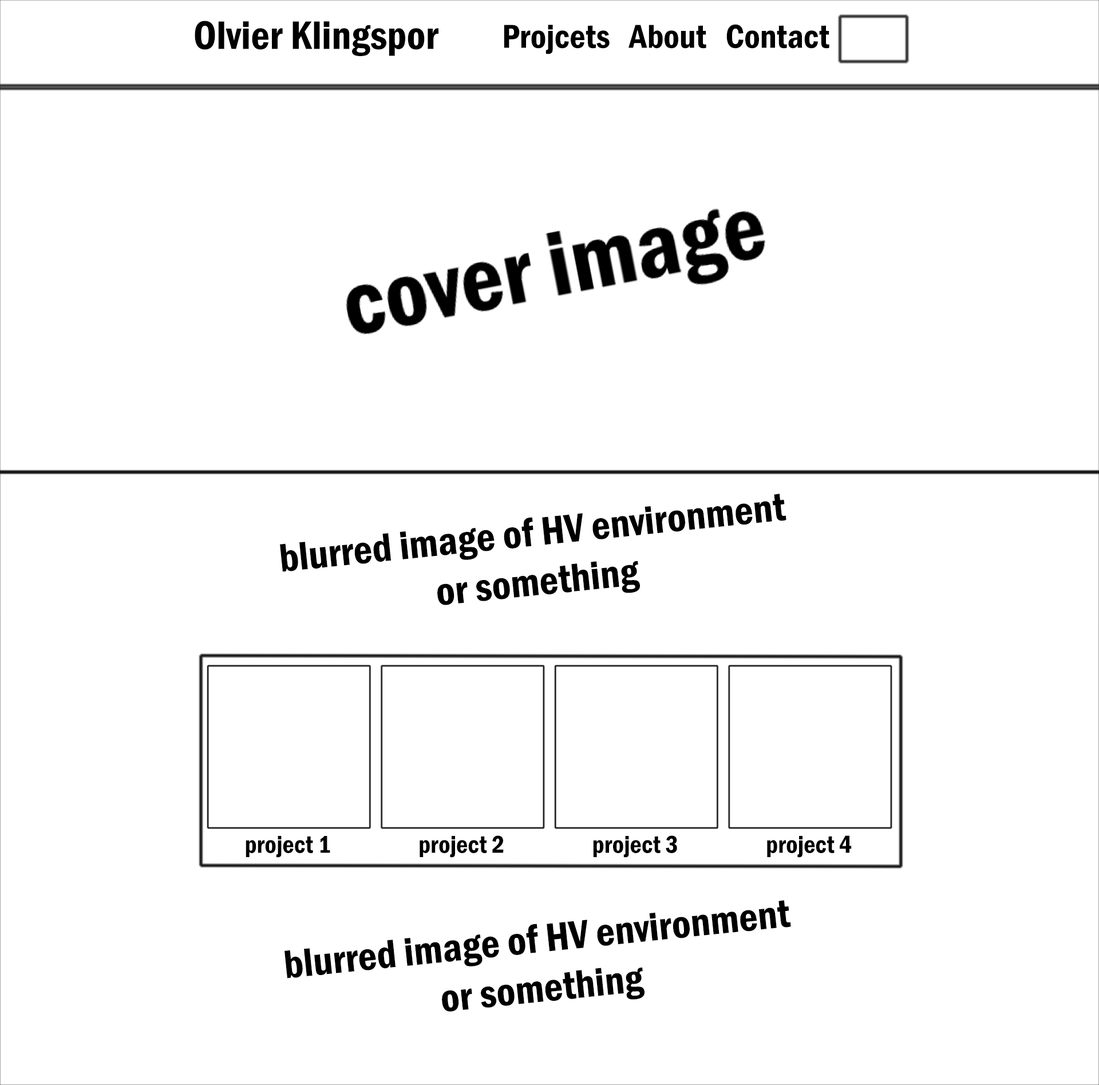
<style>
.page{position:relative;width:1099px;height:1085px;background:#ffffff}
.page>*{position:absolute;margin:0}
.t1{font:41.2px "FranklinGothic-DemiCond";color:#000000}
.t2{font:34.3px "FranklinGothic-DemiCond";color:#000000}
.t3{font:25.4px "FranklinGothic-DemiCond";color:#000000}
</style>
<div class="page">
<p class="t1" style="left:195px;top:21px;width:244px;height:35px">Olvier Klingspor</p>
<p class="t2" style="left:504px;top:24px;width:326px;height:30px">Projcets   About   Contact</p>
<p class="t1" style="left:280px;top:493px;width:507px;height:112px;rotate:-6deg">blurred image of HV environment or something</p>
<p class="t3" style="left:246px;top:836px;width:84px;height:22px">project 1</p>
<p class="t3" style="left:420px;top:835px;width:84px;height:23px">project 2</p>
<p class="t3" style="left:593px;top:835px;width:84px;height:23px">project 3</p>
<p class="t3" style="left:767px;top:835px;width:85px;height:23px">project 4</p>
<p class="t1" style="left:285px;top:900px;width:506px;height:112px;rotate:-6deg">blurred image of HV environment or something</p>
</div>
